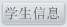
<style>
.page{position:relative;width:67px;height:27px}
.page>*{position:absolute;margin:0}
.t1{font:14px "NSimSun";color:#585858}
</style>
<div class="page">
<p class="t1" style="left:5px;top:6px;width:55px;height:14px">学生信息</p>
</div>
